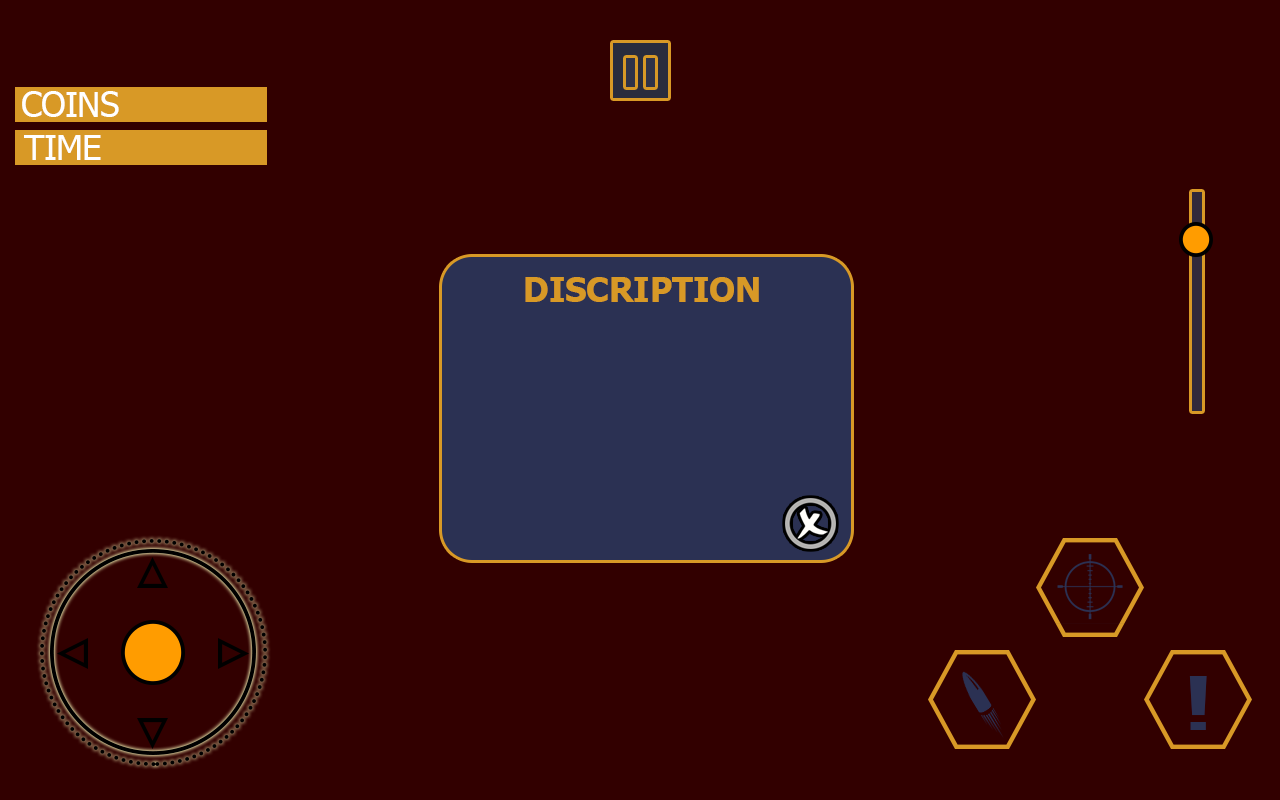
<style>
.page{position:relative;width:1280px;height:800px;background:#320000}
.page>*{position:absolute;margin:0}
.t1{font:35.1px "Tahoma";letter-spacing:-0.03em;color:#ffffff}
.t2{font:33.5px "Tahoma-Bold";color:#d89926}
.t3{font:74.1px "Tahoma";letter-spacing:-0.03em;color:#2b3153;scale:2.06 1}
</style>
<div class="page">
<p class="t1" style="left:22px;top:91px;width:97px;height:26px">COINS</p>
<p class="t1" style="left:24px;top:135px;width:77px;height:25px">TIME</p>
<p class="t2" style="left:525px;top:277px;width:234px;height:25px">DISCRIPTION</p>
<p class="t3" style="left:1189px;top:676px;width:18px;height:54px">!</p>
</div>
